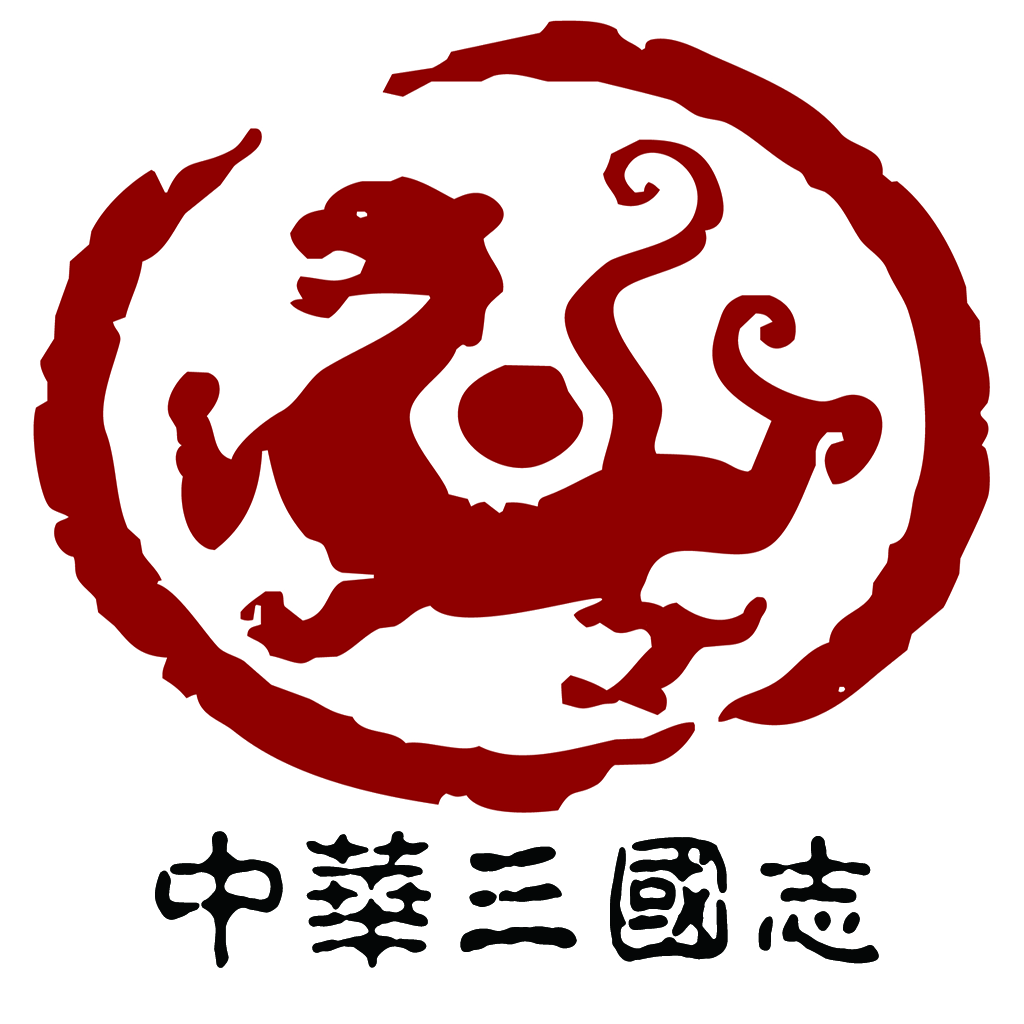
<style>
.page{position:relative;width:1024px;height:1024px;background:#ffffff}
.page>*{position:absolute;margin:0}
.t1{font:150px "¾­µä·±µ­¹Å Regular";color:#040606}
</style>
<div class="page">
<p class="t1" style="left:155px;top:831px;width:724px;height:137px">中华三国志</p>
</div>
